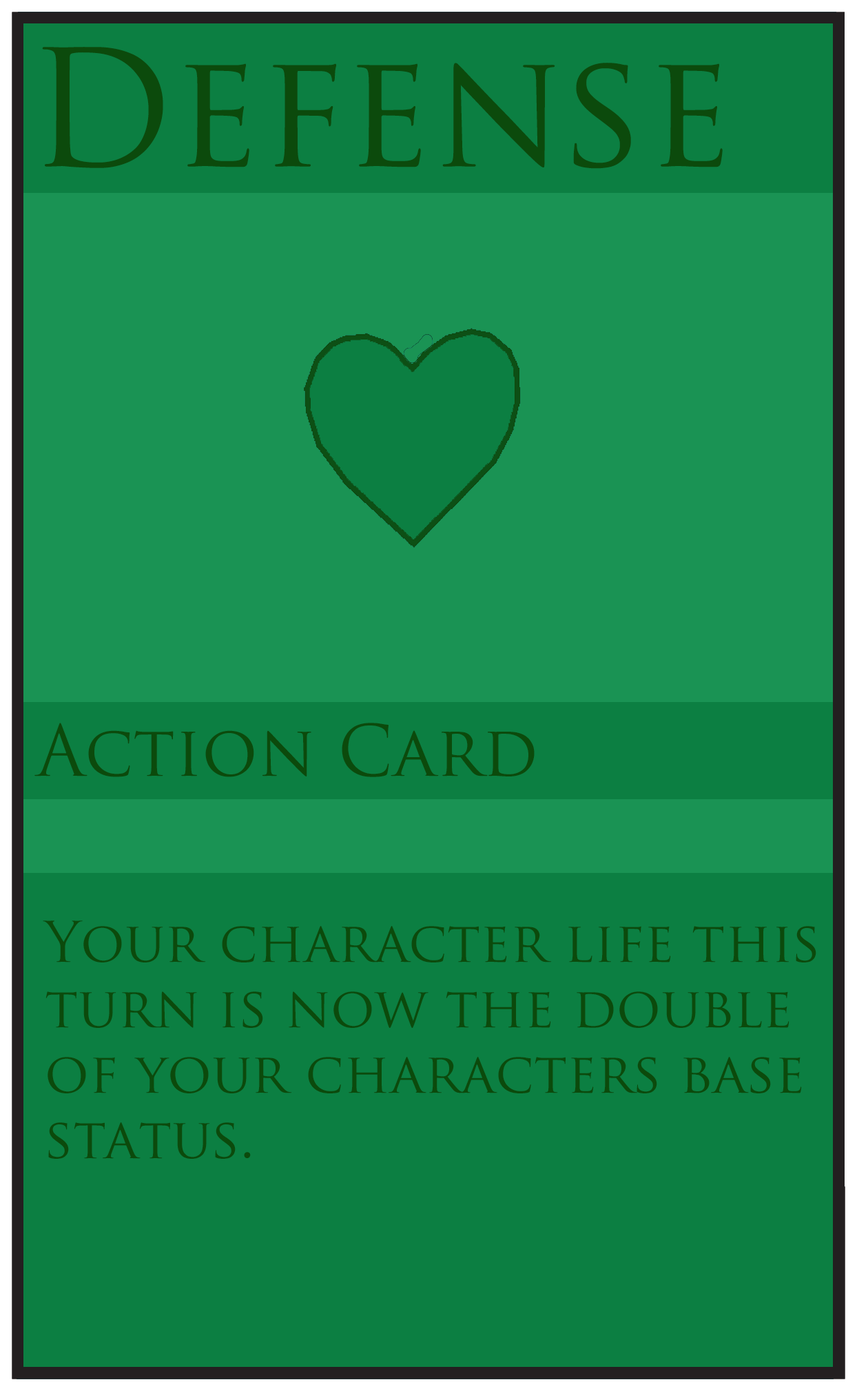
<style>
.page{position:relative;width:857px;height:1391px;background:#0c7f42}
.page>*{position:absolute;margin:0}
.t1{font:157.9px "TrajanPro-Regular";color:#0c4a0c}
.t2{font:68.9px "TrajanPro-Regular";color:#0c4a0c}
.t3{font:54.5px "TrajanPro-Regular";color:#0c4a0c}
</style>
<div class="page">
<p class="t1" style="left:42px;top:47px;width:681px;height:122px">Defense</p>
<p class="t2" style="left:34px;top:723px;width:501px;height:54px">Action Card</p>
<p class="t3" style="left:43px;top:921px;width:774px;height:238px">Your character life this<br>turn is now the double <br>of your characters base <br>status.</p>
</div>
